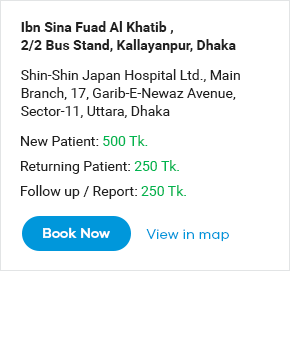
<style>
.page{position:relative;width:290px;height:349px;background:#ffffff}
.page>*{position:absolute;margin:0}
.t1{font:14px/18px "Roboto-Bold";color:#212121}
.t2{font:14px/18px "Roboto-Regular";color:#212121}
.t3{font:14px "Roboto-Regular";color:#212121}
.t4{font:14px "Roboto-Regular";color:#00b550}
.t5{font:14px "GalanoGrotesque-SemiBold";color:#ffffff}
.t6{font:14px "GalanoGrotesque-Regular";color:#0097db}
</style>
<div class="page">
<p class="t1" style="left:21px;top:21px;width:215px;height:32px;text-align:right">Ibn Sina Fuad Al Khatib , <br>2/2 Bus Stand, Kallayanpur, Dhaka</p>
<p class="t2" style="left:21px;top:69px;width:219px;height:49px;text-align:right">Shin-Shin Japan Hospital Ltd., Main Branch, 17, Garib-E-Newaz Avenue, Sector-11, Uttara, Dhaka</p>
<p class="t3" style="left:21px;top:135px;width:127px;height:11px">New Patient: <span class="t4">500 Tk.</span></p>
<p class="t3" style="left:21px;top:160px;width:158px;height:14px">Returning Patient: <span class="t4">250 Tk.</span></p>
<p class="t3" style="left:21px;top:185px;width:165px;height:14px">Follow up / Report: <span class="t4">250 Tk.</span></p>
<p class="t5" style="left:43px;top:227px;width:67px;height:11px">Book Now</p>
<p class="t6" style="left:146px;top:229px;width:83px;height:13px">View in map</p>
</div>
